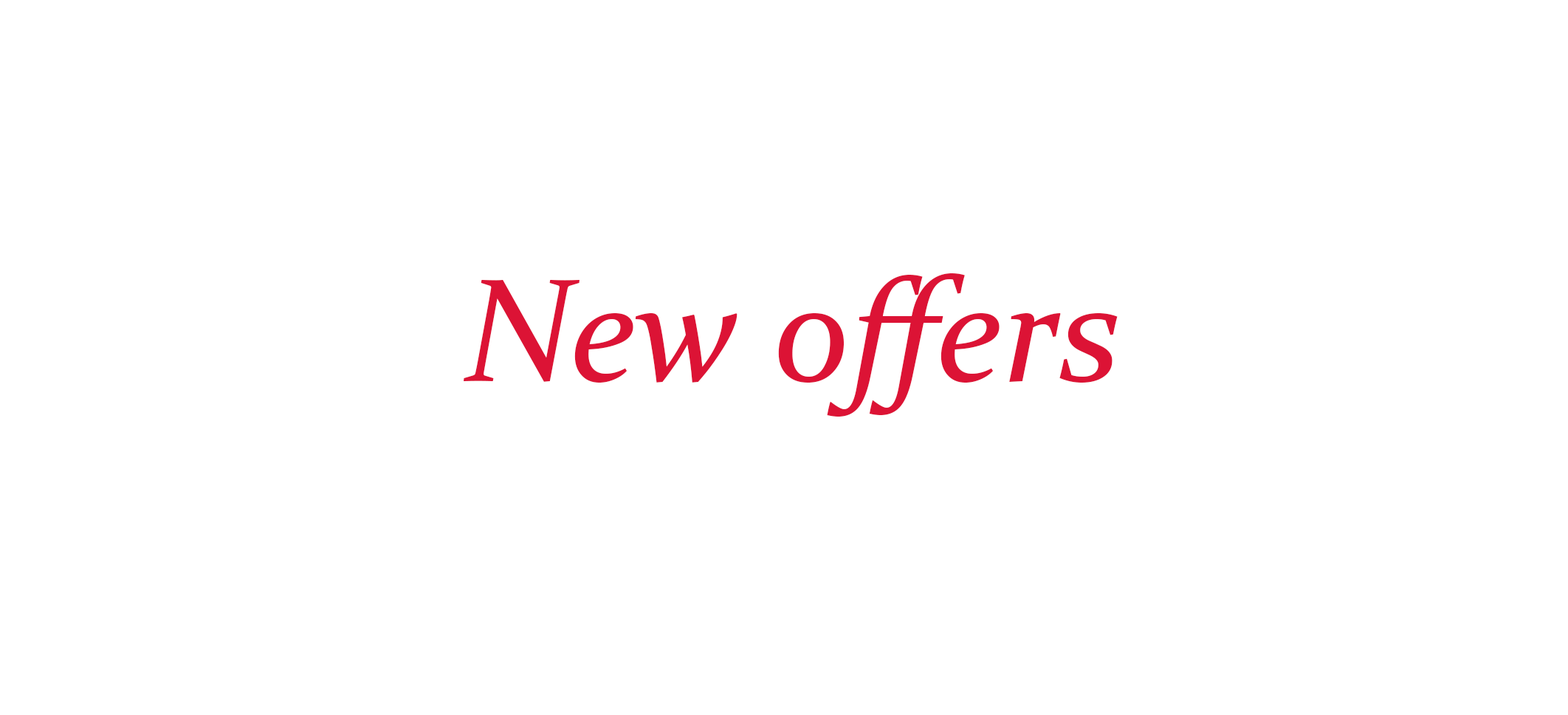
<style>
.page{position:relative;width:1568px;height:715px;background:#ffffff}
.page>*{position:absolute;margin:0}
.t1{font:147.6px "Constantia-Italic";color:#dc1335}
</style>
<div class="page">
<p class="t1" style="left:464px;top:273px;width:654px;height:143px">New offers</p>
</div>
